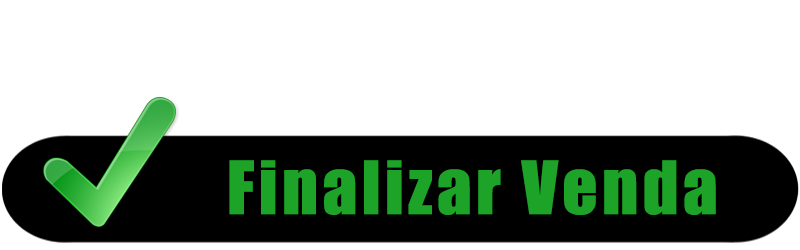
<style>
.page{position:relative;width:800px;height:250px;background:#ffffff}
.page>*{position:absolute;margin:0}
.t1{font:68px "Impact";letter-spacing:0.06em;color:#1ca328}
</style>
<div class="page">
<p class="t1" style="left:229px;top:160px;width:487px;height:55px">Finalizar Venda</p>
</div>
